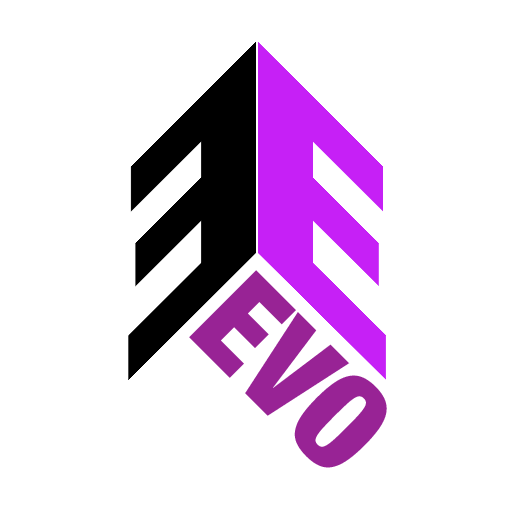
<style>
.page{position:relative;width:512px;height:512px;background:#ffffff}
.page>*{position:absolute;margin:0}
.t1{font:132.9px "HelveticaNeue-CondensedBlack";color:#982395}
</style>
<div class="page">
<p class="t1" style="left:189px;top:270px;width:198px;height:198px;rotate:45deg">EVO</p>
</div>
